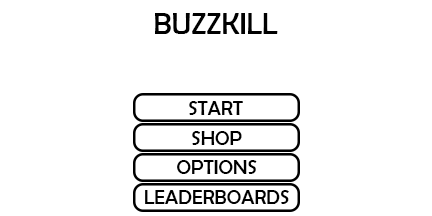
<style>
.page{position:relative;width:432px;height:216px;background:#ffffff}
.page>*{position:absolute;margin:0}
.t1{font:30px "BerlinSansFB-Reg";color:#000000}
.t2{font:20px "BerlinSansFB-Reg";color:#000000}
</style>
<div class="page">
<p class="t1" style="left:155px;top:13px;width:123px;height:21px">BUZZKILL</p>
<p class="t2" style="left:189px;top:101px;width:54px;height:14px">START</p>
<p class="t2" style="left:192px;top:131px;width:50px;height:14px">SHOP</p>
<p class="t2" style="left:177px;top:160px;width:80px;height:14px">OPTIONS</p>
<p class="t2" style="left:145px;top:190px;width:144px;height:14px">LEADERBOARDS</p>
</div>
